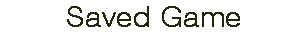
<style>
.page{position:relative;width:300px;height:35px;background:#ffffff}
.page>*{position:absolute;margin:0}
.t1{font:27.5px "HP-Swiss-Thin-Regular";color:#25270c;font-weight:bold;scale:1.09 1}
</style>
<div class="page">
<p class="t1" style="left:67px;top:6px;width:173px;height:21px">Saved Game</p>
</div>
